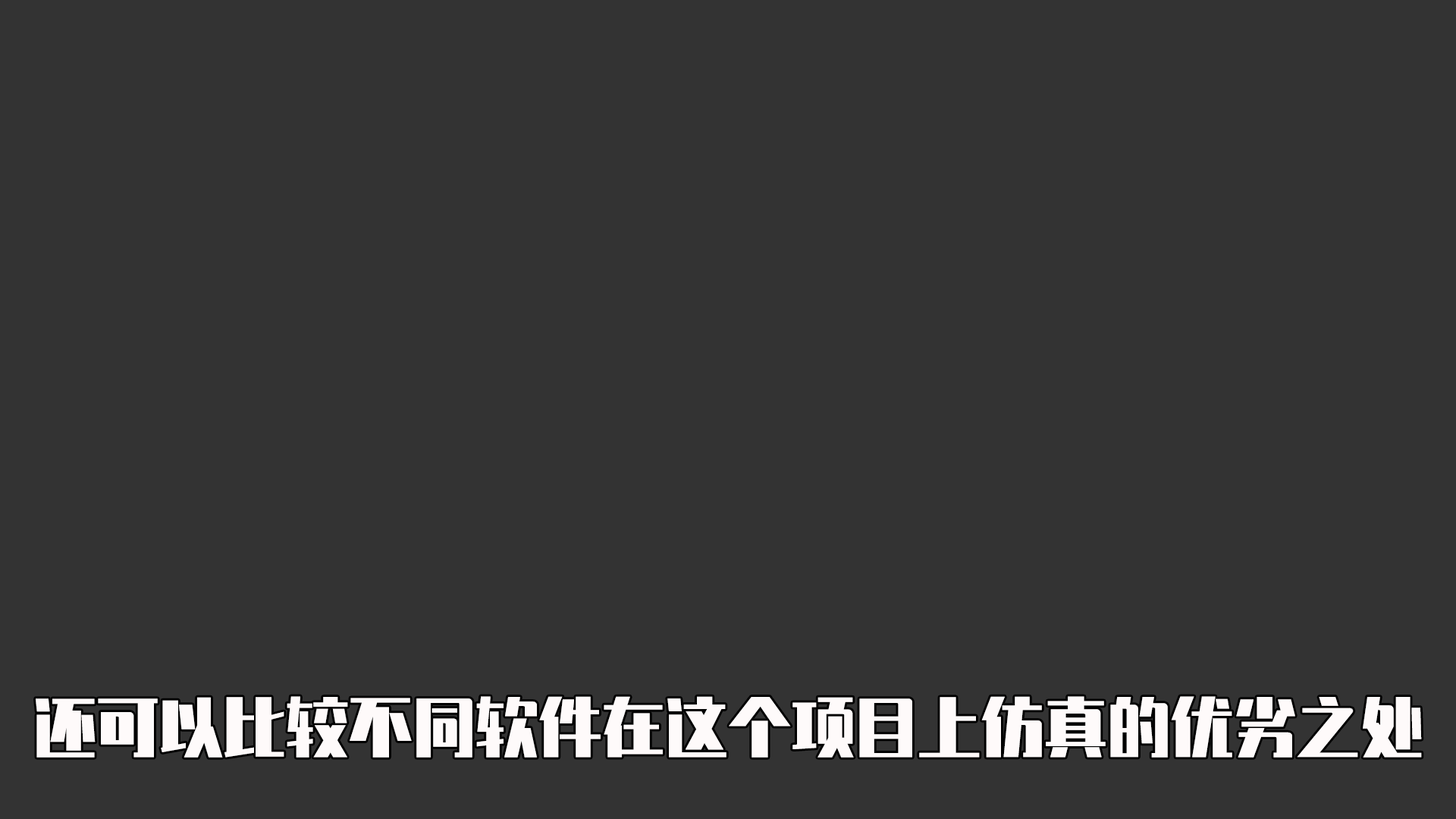
<style>
.page{position:relative;width:1456px;height:819px;background:#333333}
.page>*{position:absolute;margin:0}
.t1{font:63.2px "ZhenyanGB-Regular";color:#fefafa}
</style>
<div class="page">
<p class="t1" style="left:36px;top:696px;width:1386px;height:62px">还可以比较不同软件在这个项目上仿真的优劣之处</p>
</div>
